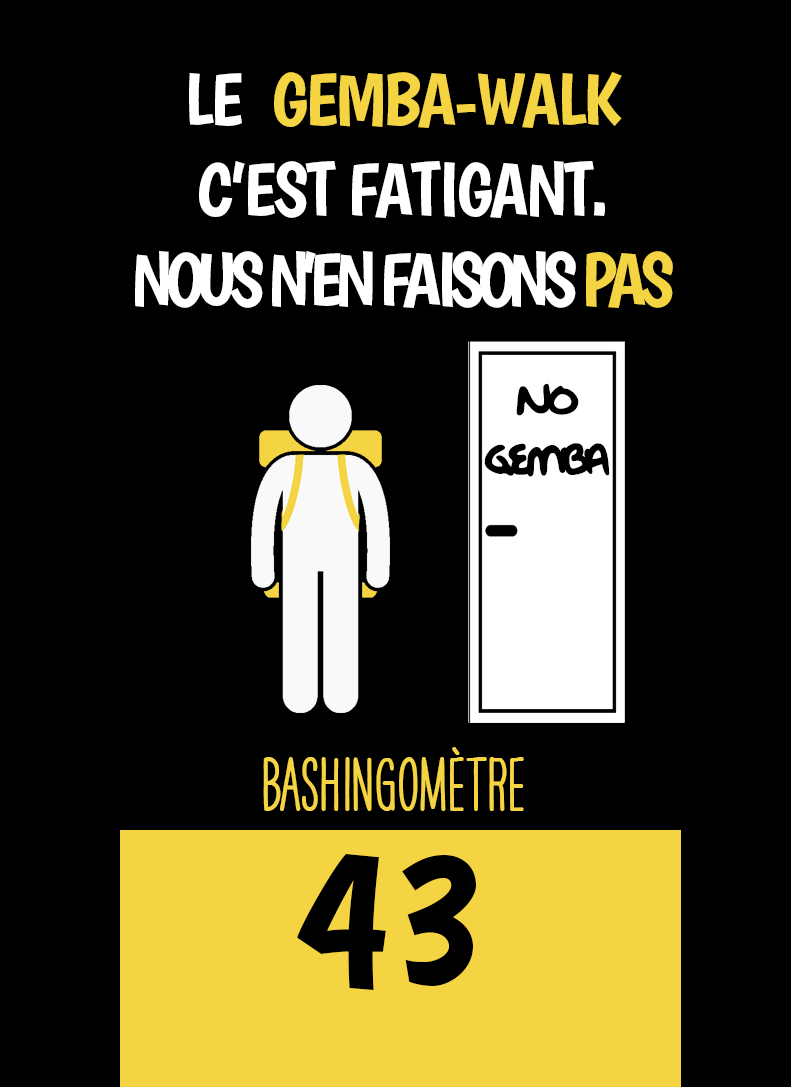
<style>
.page{position:relative;width:791px;height:1087px;background:#000000}
.page>*{position:absolute;margin:0}
.t1{font:75px "Boogaloo-Regular";letter-spacing:-0.1em;color:#ffffff}
.t2{font:75px "Boogaloo-Regular";letter-spacing:-0.04em;color:#ffffff}
.t3{font:75px "Boogaloo-Regular";letter-spacing:-0.04em;color:#f4d443}
.t4{font:75px "Boogaloo-Regular";letter-spacing:-0.1em;color:#f4d443}
.t5{font:50px "OakStreetW01-Regular";letter-spacing:-0.1em;color:#000000}
.t6{font:66.7px "HAVEANICEDAYTallW04-Bold";color:#f4d443}
.t7{font:200px "Boogaloo-Regular";color:#000000}
</style>
<div class="page">
<p class="t1" style="left:135px;top:72px;width:538px;height:236px;text-align:center"><span class="t2">LE  </span><span class="t3">GEMBA-WALK</span><span class="t2"> <br>C’EST FATIGANT.<br></span>NOUS N’EN FAISONS <span class="t4">PAS</span></p>
<p class="t5" style="left:484px;top:383px;width:126px;height:94px;text-align:center">NO<br>GEMBA</p>
<p class="t6" style="left:263px;top:747px;width:261px;height:64px">BASHINgomètre</p>
<p class="t7" style="left:297px;top:854px;width:179px;height:136px">43</p>
</div>
